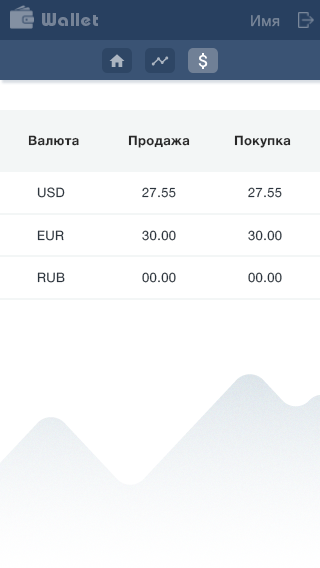
<style>
.page{position:relative;width:320px;height:568px;background:#ffffff}
.page>*{position:absolute;margin:0}
.t1{font:18px "BauhausC-Bold";letter-spacing:0.06em;color:#758397}
.t2{font:15px "HelveticaNeueCyr-Roman";letter-spacing:0.03em;color:#79879a}
.t3{font:13px "HelveticaNeueCyr-Bold";letter-spacing:0.03em;color:#282828}
.t4{font:13px "HelveticaNeueCyr-Roman";letter-spacing:0.03em;color:#2c353e}
</style>
<div class="page">
<p class="t1" style="left:42px;top:13px;width:56px;height:13px">Wallet</p>
<p class="t2" style="left:251px;top:15px;width:29px;height:12px">Имя</p>
<p class="t3" style="left:28px;top:135px;width:51px;height:11px">Валюта</p>
<p class="t3" style="left:128px;top:135px;width:62px;height:13px">Продажа</p>
<p class="t3" style="left:234px;top:135px;width:57px;height:13px">Покупка</p>
<p class="t4" style="left:37px;top:187px;width:28px;height:11px">USD</p>
<p class="t4" style="left:142px;top:187px;width:34px;height:11px">27.55</p>
<p class="t4" style="left:248px;top:187px;width:34px;height:11px">27.55</p>
<p class="t4" style="left:37px;top:230px;width:27px;height:11px">EUR</p>
<p class="t4" style="left:142px;top:230px;width:34px;height:11px">30.00</p>
<p class="t4" style="left:248px;top:230px;width:34px;height:11px">30.00</p>
<p class="t4" style="left:37px;top:272px;width:28px;height:11px">RUB</p>
<p class="t4" style="left:142px;top:272px;width:34px;height:11px">00.00</p>
<p class="t4" style="left:248px;top:272px;width:34px;height:11px">00.00</p>
</div>
